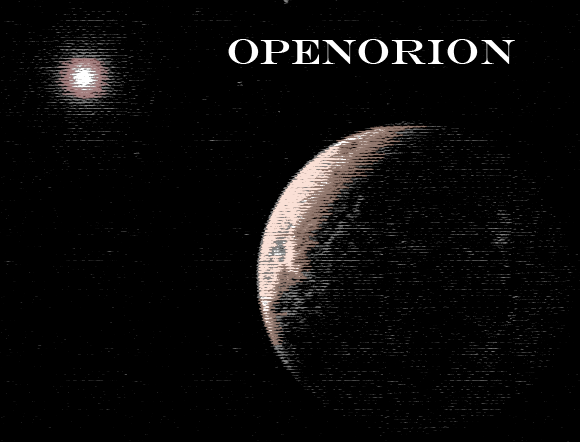
<style>
.page{position:relative;width:580px;height:442px;background:#000000}
.page>*{position:absolute;margin:0}
.t1{font:36px "EngraversMT";color:#ffffff}
</style>
<div class="page">
<p class="t1" style="left:228px;top:39px;width:287px;height:25px">OPENORION</p>
</div>
